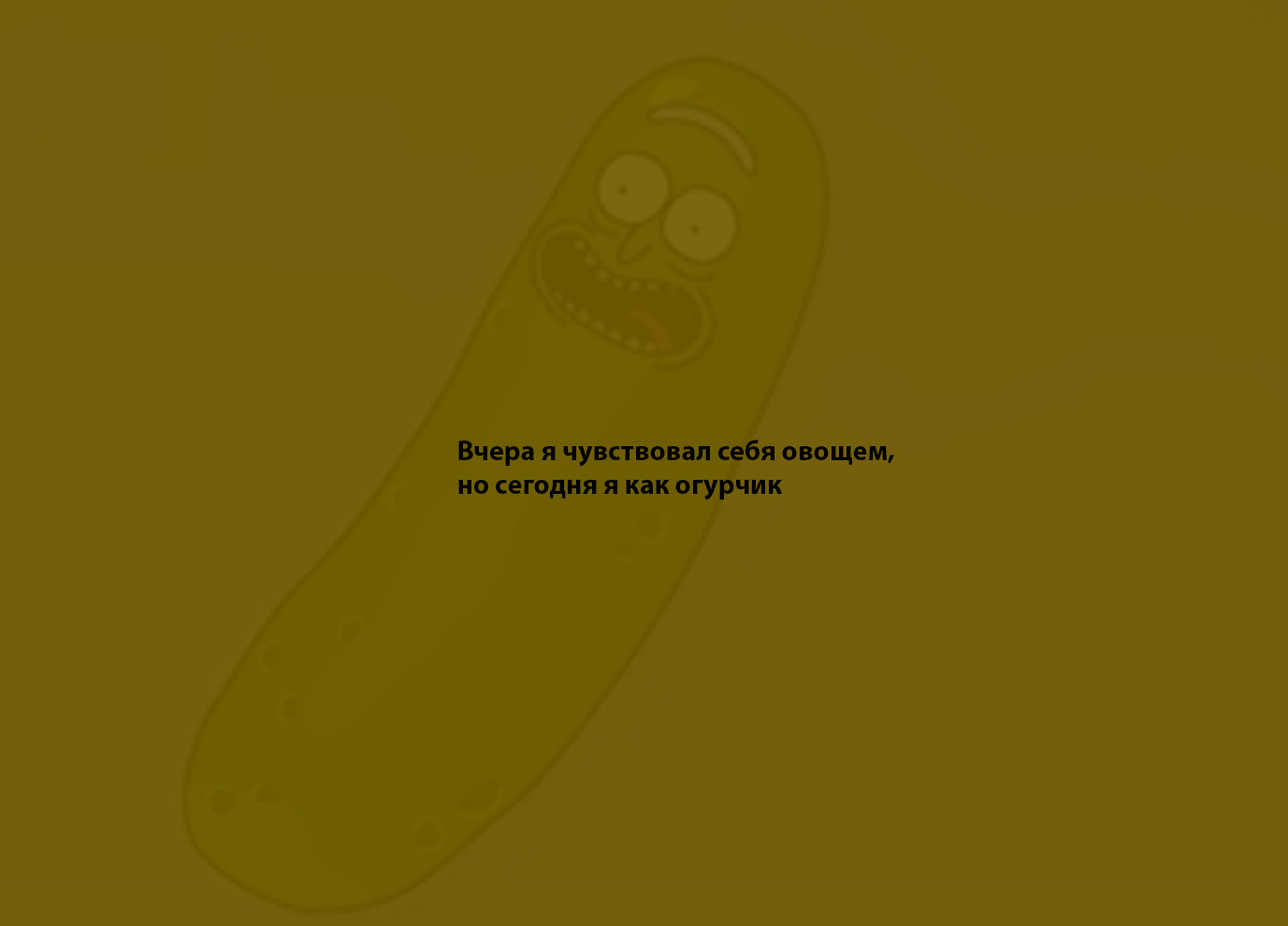
<style>
.page{position:relative;width:1288px;height:926px;background:#745f0d}
.page>*{position:absolute;margin:0}
.t1{font:28.1px "MyriadPro-Bold";color:#000000}
</style>
<div class="page">
<p class="t1" style="left:458px;top:440px;width:436px;height:60px;text-align:right">Вчера я чувствовал себя овощем, <br>но сегодня я как огурчик</p>
</div>
